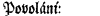
<style>
.page{position:relative;width:100px;height:16px;background:#ffffff}
.page>*{position:absolute;margin:0}
.t1{font:12px "FR_KMS_01cs";color:#000000}
</style>
<div class="page">
<p class="t1" style="left:3px;top:1px;width:58px;height:15px">Povolání:</p>
</div>
